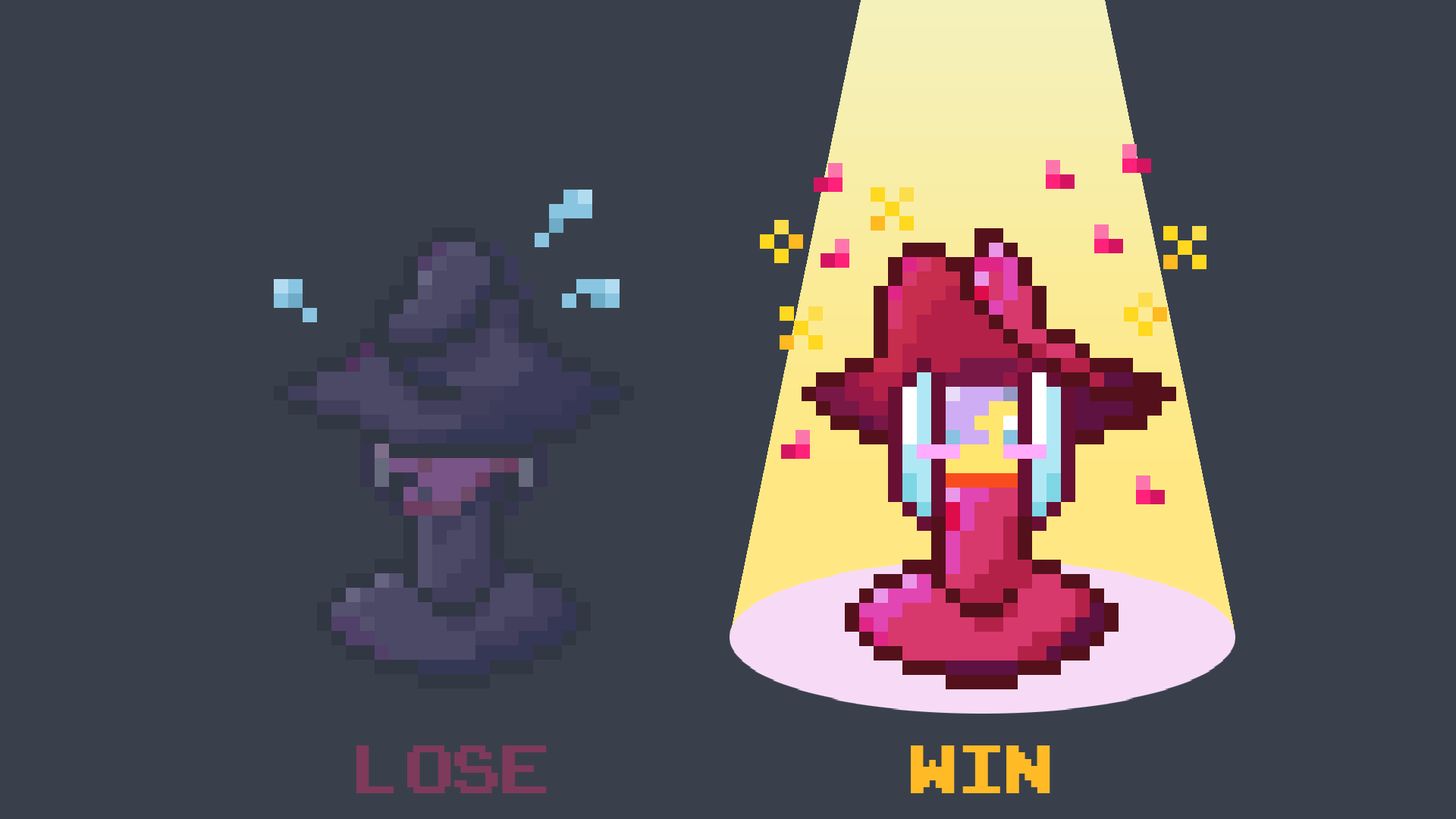
<style>
.page{position:relative;width:1456px;height:819px;background:#39404c}
.page>*{position:absolute;margin:0}
.t1{font:96.5px "ArcadeClassic";color:#7e3a5a;scale:0.9 1}
.t2{font:96.5px "ArcadeClassic";color:#ffba26;scale:0.9 1}
</style>
<div class="page">
<p class="t1" style="left:356px;top:745px;width:191px;height:48px">lose</p>
<p class="t2" style="left:911px;top:745px;width:139px;height:48px">WIN</p>
</div>
